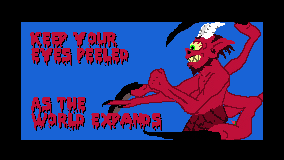
<style>
.page{position:relative;width:284px;height:160px;background:#000000}
.page>*{position:absolute;margin:0}
.t1{font:14px/16px "PiecesNFI";color:#bf0e38}
</style>
<div class="page">
<p class="t1" style="left:30px;top:32px;width:98px;height:33px">KeeP your<br>eyes peeled</p>
<p class="t1" style="left:31px;top:33px;width:98px;height:33px">KeeP your<br>eyes peeled</p>
<p class="t1" style="left:31px;top:97px;width:130px;height:33px">AS The<br>world expands</p>
<p class="t1" style="left:32px;top:98px;width:130px;height:33px">AS The<br>world expands</p>
</div>
